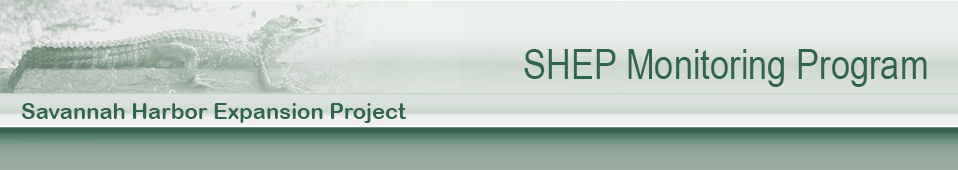
<style>
.page{position:relative;width:958px;height:170px}
.page>*{position:absolute;margin:0}
.t1{font:42px "ArialNarrow";color:#2f654e}
.t2{font:22px "ArialRoundedMTBold";color:#2f654e}
</style>
<div class="page">
<p class="t1" style="left:524px;top:49px;width:403px;height:38px">SHEP Monitoring Program</p>
<p class="t2" style="left:22px;top:103px;width:385px;height:20px">Savannah Harbor Expansion Project</p>
</div>
